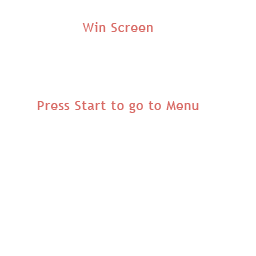
<style>
.page{position:relative;width:256px;height:256px;background:#ffffff}
.page>*{position:absolute;margin:0}
.t1{font:13px "TrebuchetMS";letter-spacing:0.05em;color:#d86a65}
</style>
<div class="page">
<p class="t1" style="left:82px;top:22px;width:71px;height:10px">Win Screen</p>
<p class="t1" style="left:37px;top:101px;width:162px;height:12px">Press Start to go to Menu</p>
</div>
